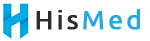
<style>
.page{position:relative;width:150px;height:41px;background:#ffffff}
.page>*{position:absolute;margin:0}
.t1{font:26.4px "Ubuntu";letter-spacing:0.1em;color:#2c2c2c;font-weight:bold}
.t2{font:26.4px "Ubuntu";letter-spacing:0.1em;color:#23a8e2;font-weight:bold}
</style>
<div class="page">
<p class="t1" style="left:36px;top:9px;width:104px;height:21px">His<span class="t2">Med</span></p>
</div>
